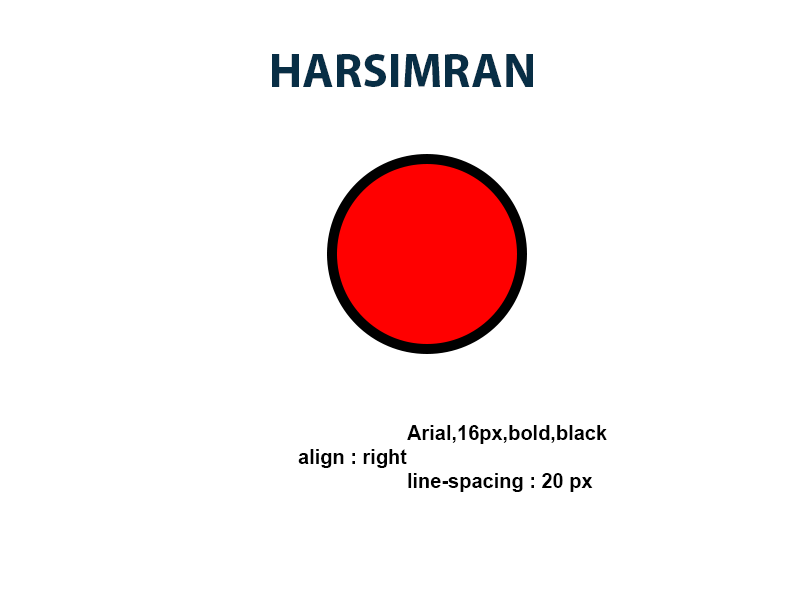
<style>
.page{position:relative;width:800px;height:600px;background:#ffffff}
.page>*{position:absolute;margin:0}
.t1{font:48px "MyriadPro-Bold";color:#082e45}
.t2{font:20px "Arial-BoldMT";color:#000000}
</style>
<div class="page">
<p class="t1" style="left:272px;top:54px;width:261px;height:33px">HARSIMRAN</p>
<p class="t2" style="left:298px;top:425px;width:309px;height:67px">Arial,16px,bold,black<br>align : right<br>line-spacing : 20 px</p>
</div>
